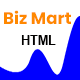
<style>
.page{position:relative;width:80px;height:80px;background:#ffffff}
.page>*{position:absolute;margin:0}
.t1{font:16.7px "Poppins-Bold";color:#ff8800}
.t2{font:12.5px "Arial-BoldMT";color:#020100}
</style>
<div class="page">
<p class="t1" style="left:4px;top:10px;width:67px;height:15px">Biz Mart</p>
<p class="t2" style="left:21px;top:35px;width:35px;height:10px">HTML</p>
</div>
